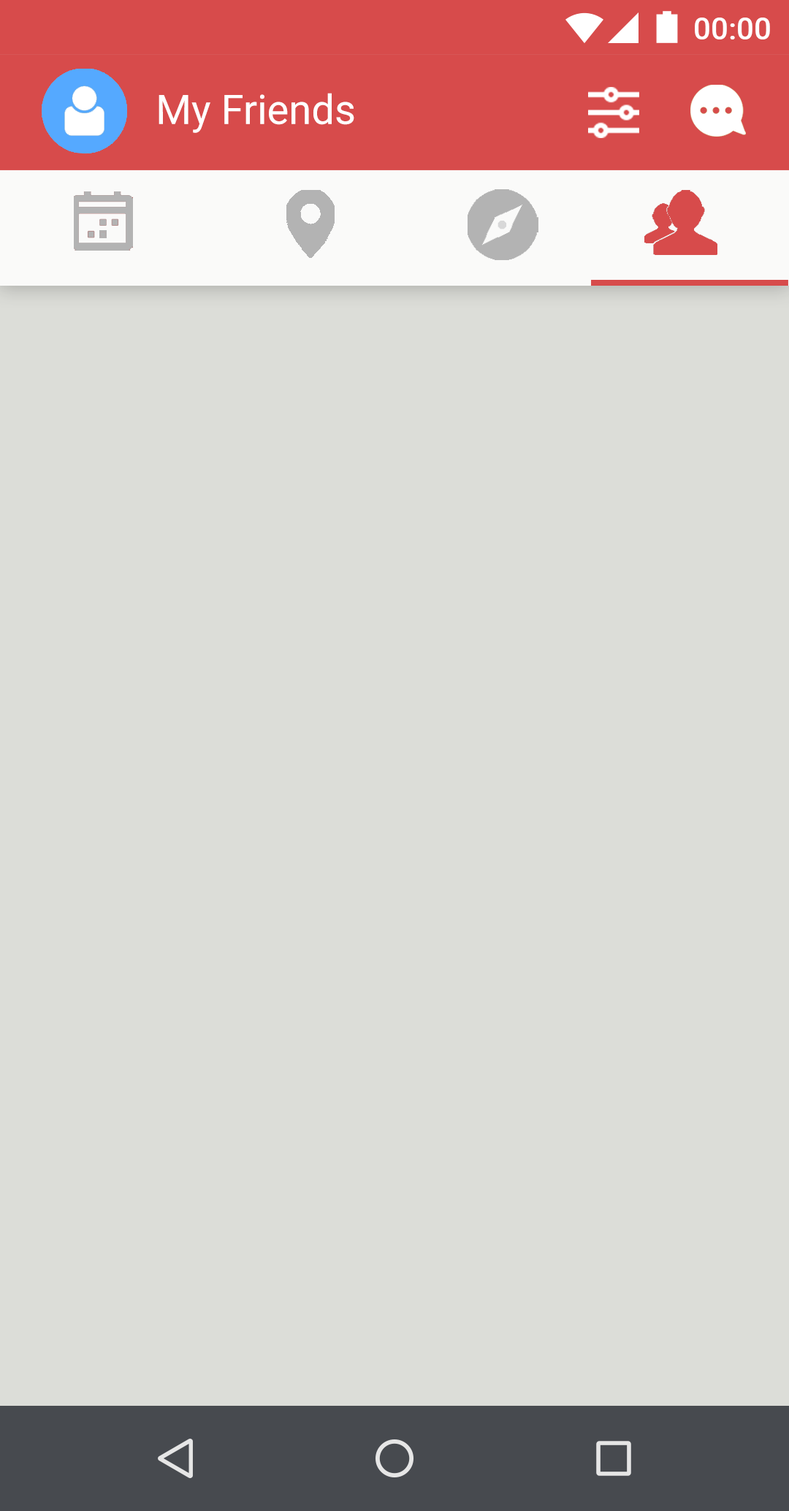
<style>
.page{position:relative;width:789px;height:1511px;background:#dcddd8}
.page>*{position:absolute;margin:0}
.t1{font:30.7px "Roboto-Medium";color:#ffffff}
.t2{font:40.9px "Roboto-Regular";color:#ffffff}
</style>
<div class="page">
<p class="t1" style="left:695px;top:18px;width:75px;height:21px">00:00</p>
<p class="t2" style="left:159px;top:93px;width:195px;height:40px">My Friends</p>
</div>
